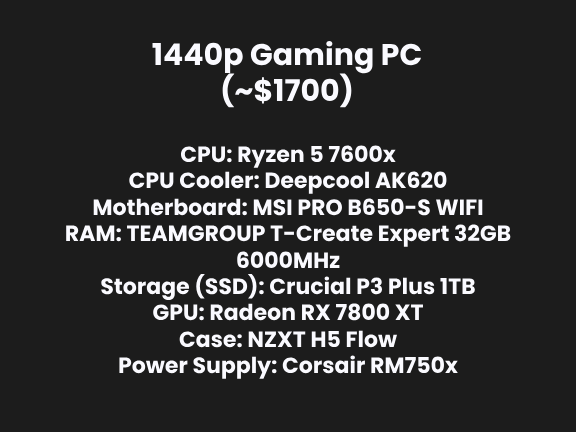
<style>
.page{position:relative;width:576px;height:432px;background:#1c1c1c}
.page>*{position:absolute;margin:0}
.t1{font:30px "Poppins-Bold";color:#fafaff}
.t2{font:22px "Poppins-Bold";color:#fafaff}
</style>
<div class="page">
<p class="t1" style="left:152px;top:40px;width:269px;height:68px;text-align:center">1440p Gaming PC<br>(~$1700)</p>
<p class="t2" style="left:66px;top:145px;width:445px;height:234px;text-align:center">CPU: Ryzen 5 7600x<br>CPU Cooler: Deepcool AK620<br>Motherboard: MSI PRO B650-S WIFI<br>RAM: TEAMGROUP T-Create Expert 32GB<br>6000MHz<br>Storage (SSD): Crucial P3 Plus 1TB<br>GPU: Radeon RX 7800 XT<br>Case: NZXT H5 Flow<br>Power Supply: Corsair RM750x</p>
</div>
